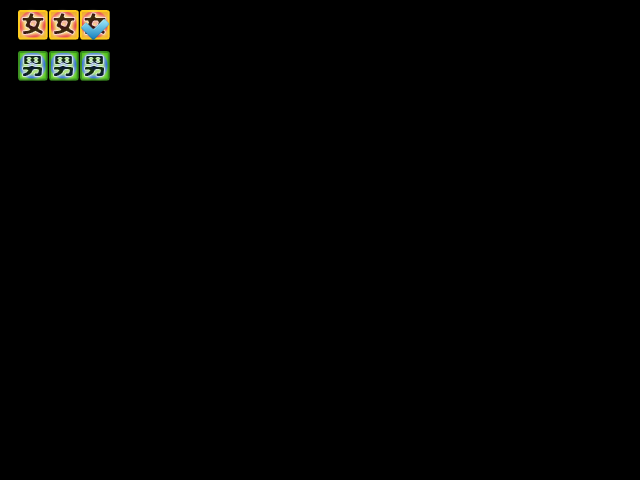
<style>
.page{position:relative;width:640px;height:480px;background:#000000}
.page>*{position:absolute;margin:0}
.t1{font:24px "STHupo"}
</style>
<div class="page">
<p class="t1" style="left:21px;top:12px;width:24px;height:23px">女</p>
<p class="t1" style="left:52px;top:12px;width:24px;height:23px">女</p>
<p class="t1" style="left:83px;top:12px;width:24px;height:23px">女</p>
<p class="t1" style="left:22px;top:55px;width:21px;height:22px">男</p>
<p class="t1" style="left:53px;top:55px;width:21px;height:22px">男</p>
<p class="t1" style="left:84px;top:55px;width:21px;height:22px">男</p>
</div>
